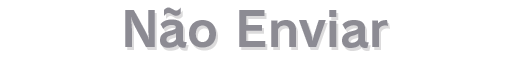
<style>
.page{position:relative;width:512px;height:60px;background:#ffffff}
.page>*{position:absolute;margin:0}
.t1{font:48px "RodinPro-B";color:#8c8b93}
</style>
<div class="page">
<p class="t1" style="left:125px;top:7px;width:263px;height:41px">Não Enviar</p>
</div>
